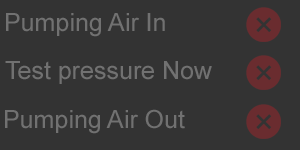
<style>
.page{position:relative;width:300px;height:150px;background:#333333}
.page>*{position:absolute;margin:0}
.t1{font:25px "ArialMT";color:#717171}
</style>
<div class="page">
<p class="t1" style="left:6px;top:13px;width:159px;height:24px">Pumping Air In</p>
<p class="t1" style="left:5px;top:61px;width:207px;height:23px">Test pressure Now</p>
<p class="t1" style="left:5px;top:109px;width:180px;height:25px">Pumping Air Out</p>
</div>
